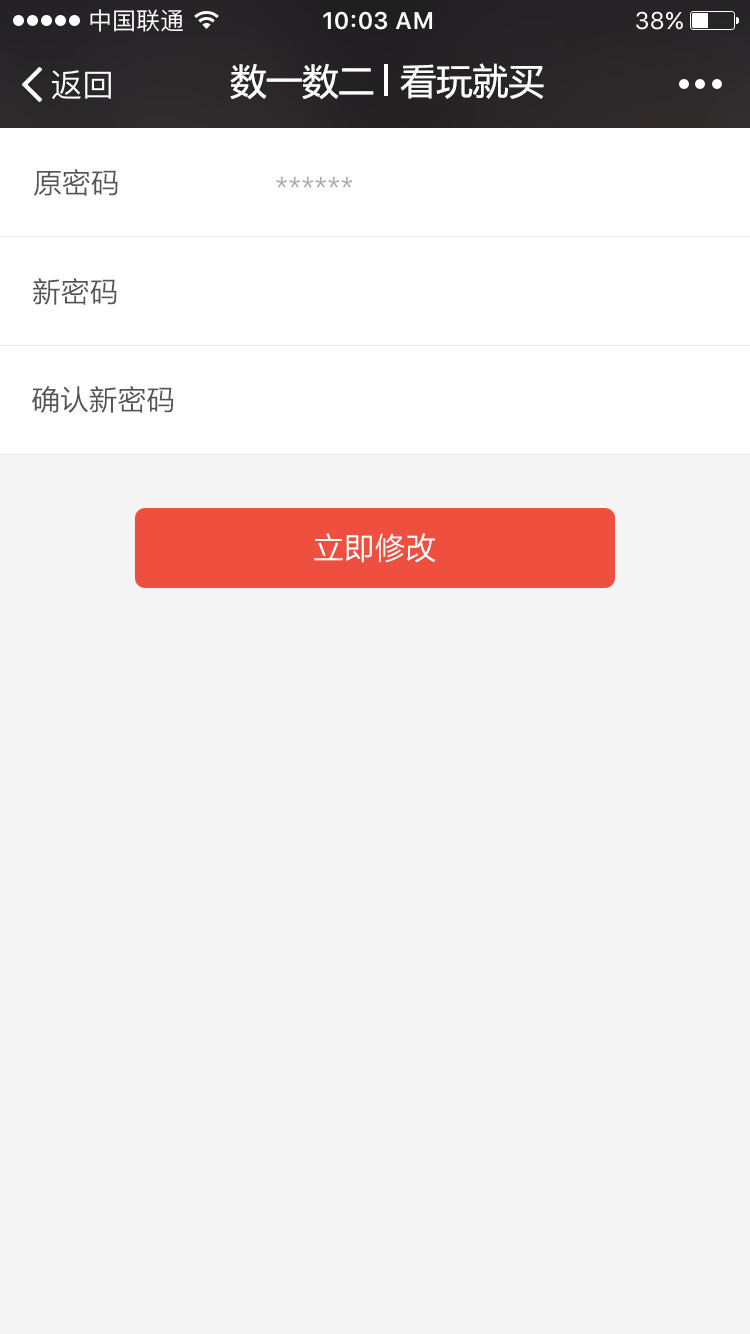
<style>
.page{position:relative;width:750px;height:1334px;background:#f4f4f4}
.page>*{position:absolute;margin:0}
.t1{font:36px "MicrosoftYaHei";color:#ffffff}
.t2{font:28px "MicrosoftYaHeiLight";color:#555555;font-weight:bold}
.t3{font:28px "MicrosoftYaHeiLight";color:#adadad;font-weight:bold}
.t4{font:30px "MicrosoftYaHeiLight";color:#ffffff;font-weight:bold}
</style>
<div class="page">
<p class="t1" style="left:230px;top:63px;width:144px;height:37px">数一数二</p>
<p class="t1" style="left:400px;top:63px;width:144px;height:36px">看玩就买</p>
<p class="t2" style="left:34px;top:169px;width:84px;height:27px">原密码</p>
<p class="t3" style="left:276px;top:176px;width:77px;height:12px">******</p>
<p class="t2" style="left:33px;top:278px;width:84px;height:27px">新密码</p>
<p class="t2" style="left:32px;top:386px;width:142px;height:27px">确认新密码</p>
<p class="t4" style="left:314px;top:533px;width:121px;height:30px">立即修改</p>
</div>
